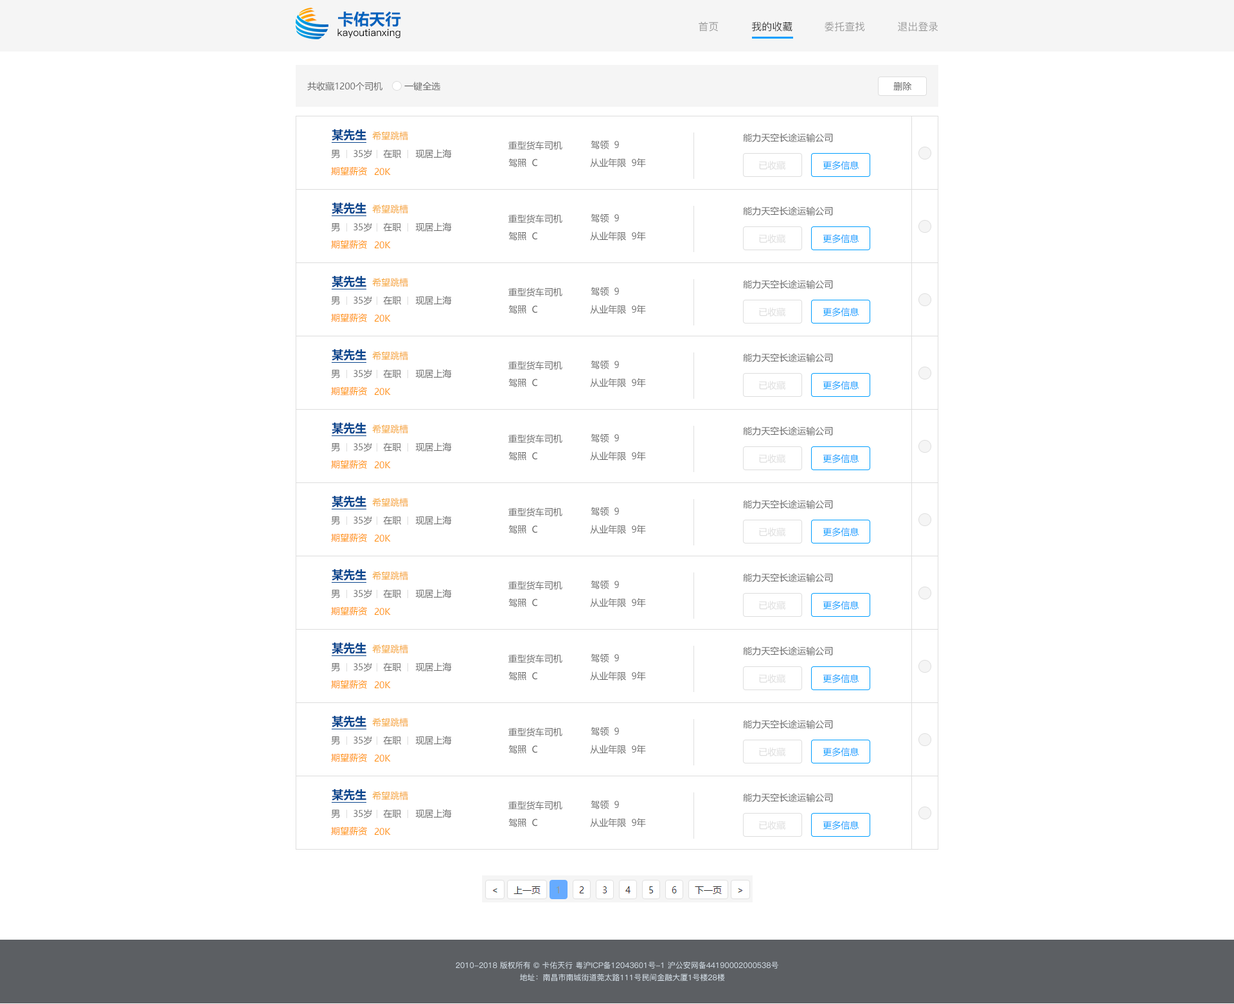
<style>
.page{position:relative;width:1234px;height:1004px;background:#ffffff}
.page>*{position:absolute;margin:0}
.t1{font:15.8px "MicrosoftYaHei-Bold";color:#0263bd}
.t2{font:10px "PingFang-SC-Medium";color:#000000}
.t3{font:10.3px "PingFang-SC-Medium";color:#999999}
.t4{font:10.3px "PingFang-SC-Medium";color:#333333}
.t5{font:9px "MicrosoftYaHei";color:#666666}
.t6{font:11.6px "MicrosoftYaHei-Bold";color:#09458d}
.t7{font:9px "MicrosoftYaHei";color:#f5a331}
.t8{font:9px "MicrosoftYaHei";color:#dddddd}
.t9{font:9px "MicrosoftYaHei";color:#009eff}
.t10{font:9px "MicrosoftYaHei";color:#ff8f05}
.t11{font:7.7px/12.2px "PingFang-SC-Medium";color:#d6e0e9}
</style>
<div class="page">
<p class="t1" style="left:338px;top:11px;width:63px;height:16px">卡佑天行</p>
<p class="t2" style="left:338px;top:28px;width:63px;height:11px">kayoutianxing</p>
<p class="t3" style="left:699px;top:22px;width:20px;height:10px">首页</p>
<p class="t4" style="left:752px;top:22px;width:41px;height:10px">我的收藏</p>
<p class="t3" style="left:825px;top:22px;width:40px;height:10px">委托查找</p>
<p class="t3" style="left:898px;top:22px;width:41px;height:10px">退出登录</p>
<p class="t5" style="left:307px;top:82px;width:75px;height:9px">共收藏1200个司机</p>
<p class="t5" style="left:404px;top:82px;width:36px;height:9px">一键全选</p>
<p class="t5" style="left:894px;top:82px;width:18px;height:9px">删除</p>
<p class="t6" style="left:332px;top:129px;width:34px;height:12px">某先生</p>
<p class="t7" style="left:372px;top:131px;width:36px;height:9px">希望跳槽</p>
<p class="t5" style="left:743px;top:133px;width:90px;height:9px">能力天空长途运输公司</p>
<p class="t5" style="left:331px;top:150px;width:9px;height:8px">男</p>
<p class="t5" style="left:354px;top:149px;width:18px;height:9px">35岁</p>
<p class="t5" style="left:383px;top:149px;width:18px;height:9px">在职</p>
<p class="t5" style="left:415px;top:149px;width:37px;height:9px">现居上海</p>
<p class="t5" style="left:509px;top:141px;width:53px;height:9px">重型货车司机</p>
<p class="t5" style="left:591px;top:140px;width:28px;height:9px">驾领  9</p>
<p class="t5" style="left:509px;top:158px;width:28px;height:9px">驾照  C</p>
<p class="t5" style="left:590px;top:158px;width:56px;height:9px">从业年限  9年</p>
<p class="t8" style="left:759px;top:161px;width:27px;height:9px">已收藏</p>
<p class="t9" style="left:823px;top:161px;width:37px;height:9px">更多信息</p>
<p class="t10" style="left:331px;top:166px;width:36px;height:10px">期望薪资</p>
<p class="t10" style="left:375px;top:168px;width:16px;height:8px">20K</p>
<p class="t6" style="left:332px;top:203px;width:34px;height:11px">某先生</p>
<p class="t7" style="left:372px;top:204px;width:36px;height:9px">希望跳槽</p>
<p class="t5" style="left:743px;top:206px;width:90px;height:9px">能力天空长途运输公司</p>
<p class="t5" style="left:509px;top:214px;width:53px;height:9px">重型货车司机</p>
<p class="t5" style="left:591px;top:213px;width:28px;height:9px">驾领  9</p>
<p class="t5" style="left:331px;top:223px;width:9px;height:8px">男</p>
<p class="t5" style="left:354px;top:222px;width:18px;height:9px">35岁</p>
<p class="t5" style="left:383px;top:222px;width:18px;height:9px">在职</p>
<p class="t5" style="left:415px;top:222px;width:37px;height:9px">现居上海</p>
<p class="t5" style="left:509px;top:231px;width:28px;height:9px">驾照  C</p>
<p class="t5" style="left:590px;top:231px;width:56px;height:9px">从业年限  9年</p>
<p class="t10" style="left:331px;top:240px;width:36px;height:9px">期望薪资</p>
<p class="t10" style="left:375px;top:241px;width:16px;height:8px">20K</p>
<p class="t8" style="left:759px;top:234px;width:27px;height:9px">已收藏</p>
<p class="t9" style="left:823px;top:234px;width:37px;height:9px">更多信息</p>
<p class="t6" style="left:332px;top:276px;width:34px;height:11px">某先生</p>
<p class="t7" style="left:372px;top:278px;width:36px;height:9px">希望跳槽</p>
<p class="t5" style="left:743px;top:280px;width:90px;height:9px">能力天空长途运输公司</p>
<p class="t5" style="left:509px;top:287px;width:53px;height:9px">重型货车司机</p>
<p class="t5" style="left:591px;top:287px;width:28px;height:9px">驾领  9</p>
<p class="t5" style="left:331px;top:296px;width:9px;height:9px">男</p>
<p class="t5" style="left:354px;top:296px;width:18px;height:9px">35岁</p>
<p class="t5" style="left:383px;top:296px;width:18px;height:9px">在职</p>
<p class="t5" style="left:415px;top:296px;width:37px;height:9px">现居上海</p>
<p class="t5" style="left:509px;top:305px;width:28px;height:9px">驾照  C</p>
<p class="t5" style="left:590px;top:305px;width:56px;height:9px">从业年限  9年</p>
<p class="t10" style="left:331px;top:313px;width:36px;height:9px">期望薪资</p>
<p class="t10" style="left:375px;top:314px;width:16px;height:8px">20K</p>
<p class="t8" style="left:759px;top:307px;width:27px;height:9px">已收藏</p>
<p class="t9" style="left:823px;top:307px;width:37px;height:9px">更多信息</p>
<p class="t6" style="left:332px;top:349px;width:34px;height:12px">某先生</p>
<p class="t7" style="left:372px;top:351px;width:36px;height:9px">希望跳槽</p>
<p class="t5" style="left:743px;top:353px;width:90px;height:9px">能力天空长途运输公司</p>
<p class="t5" style="left:509px;top:361px;width:53px;height:9px">重型货车司机</p>
<p class="t5" style="left:591px;top:360px;width:28px;height:9px">驾领  9</p>
<p class="t5" style="left:331px;top:370px;width:9px;height:8px">男</p>
<p class="t5" style="left:354px;top:369px;width:18px;height:9px">35岁</p>
<p class="t5" style="left:383px;top:369px;width:18px;height:9px">在职</p>
<p class="t5" style="left:415px;top:369px;width:37px;height:9px">现居上海</p>
<p class="t10" style="left:331px;top:386px;width:36px;height:9px">期望薪资</p>
<p class="t10" style="left:375px;top:388px;width:16px;height:7px">20K</p>
<p class="t5" style="left:509px;top:378px;width:28px;height:9px">驾照  C</p>
<p class="t5" style="left:590px;top:378px;width:56px;height:9px">从业年限  9年</p>
<p class="t8" style="left:759px;top:381px;width:27px;height:9px">已收藏</p>
<p class="t9" style="left:823px;top:381px;width:37px;height:9px">更多信息</p>
<p class="t6" style="left:332px;top:422px;width:34px;height:12px">某先生</p>
<p class="t7" style="left:372px;top:424px;width:36px;height:9px">希望跳槽</p>
<p class="t5" style="left:509px;top:434px;width:53px;height:9px">重型货车司机</p>
<p class="t5" style="left:591px;top:433px;width:28px;height:9px">驾领  9</p>
<p class="t5" style="left:743px;top:426px;width:90px;height:9px">能力天空长途运输公司</p>
<p class="t5" style="left:331px;top:443px;width:9px;height:8px">男</p>
<p class="t5" style="left:354px;top:442px;width:18px;height:9px">35岁</p>
<p class="t5" style="left:383px;top:442px;width:18px;height:9px">在职</p>
<p class="t5" style="left:415px;top:442px;width:37px;height:9px">现居上海</p>
<p class="t10" style="left:331px;top:460px;width:36px;height:9px">期望薪资</p>
<p class="t10" style="left:375px;top:461px;width:16px;height:8px">20K</p>
<p class="t5" style="left:509px;top:451px;width:28px;height:9px">驾照  C</p>
<p class="t5" style="left:590px;top:451px;width:56px;height:9px">从业年限  9年</p>
<p class="t8" style="left:759px;top:454px;width:27px;height:9px">已收藏</p>
<p class="t9" style="left:823px;top:454px;width:37px;height:9px">更多信息</p>
<p class="t6" style="left:332px;top:496px;width:34px;height:11px">某先生</p>
<p class="t7" style="left:372px;top:498px;width:36px;height:9px">希望跳槽</p>
<p class="t5" style="left:509px;top:507px;width:53px;height:9px">重型货车司机</p>
<p class="t5" style="left:591px;top:507px;width:28px;height:9px">驾领  9</p>
<p class="t5" style="left:743px;top:500px;width:90px;height:9px">能力天空长途运输公司</p>
<p class="t5" style="left:331px;top:516px;width:9px;height:9px">男</p>
<p class="t5" style="left:354px;top:516px;width:18px;height:9px">35岁</p>
<p class="t5" style="left:383px;top:516px;width:18px;height:9px">在职</p>
<p class="t5" style="left:415px;top:516px;width:37px;height:9px">现居上海</p>
<p class="t10" style="left:331px;top:533px;width:36px;height:9px">期望薪资</p>
<p class="t5" style="left:509px;top:525px;width:28px;height:9px">驾照  C</p>
<p class="t5" style="left:590px;top:525px;width:56px;height:9px">从业年限  9年</p>
<p class="t8" style="left:759px;top:527px;width:27px;height:9px">已收藏</p>
<p class="t9" style="left:823px;top:527px;width:37px;height:9px">更多信息</p>
<p class="t10" style="left:375px;top:534px;width:16px;height:8px">20K</p>
<p class="t6" style="left:332px;top:569px;width:34px;height:11px">某先生</p>
<p class="t7" style="left:372px;top:571px;width:36px;height:9px">希望跳槽</p>
<p class="t5" style="left:509px;top:580px;width:53px;height:10px">重型货车司机</p>
<p class="t5" style="left:591px;top:580px;width:28px;height:9px">驾领  9</p>
<p class="t5" style="left:743px;top:573px;width:90px;height:9px">能力天空长途运输公司</p>
<p class="t5" style="left:331px;top:590px;width:9px;height:8px">男</p>
<p class="t5" style="left:354px;top:589px;width:18px;height:9px">35岁</p>
<p class="t5" style="left:383px;top:589px;width:18px;height:9px">在职</p>
<p class="t5" style="left:415px;top:589px;width:37px;height:9px">现居上海</p>
<p class="t5" style="left:509px;top:598px;width:28px;height:9px">驾照  C</p>
<p class="t5" style="left:590px;top:598px;width:56px;height:9px">从业年限  9年</p>
<p class="t8" style="left:759px;top:600px;width:27px;height:9px">已收藏</p>
<p class="t9" style="left:823px;top:600px;width:37px;height:9px">更多信息</p>
<p class="t10" style="left:331px;top:606px;width:36px;height:9px">期望薪资</p>
<p class="t10" style="left:375px;top:608px;width:16px;height:7px">20K</p>
<p class="t6" style="left:332px;top:642px;width:34px;height:12px">某先生</p>
<p class="t7" style="left:372px;top:644px;width:36px;height:9px">希望跳槽</p>
<p class="t5" style="left:509px;top:654px;width:53px;height:9px">重型货车司机</p>
<p class="t5" style="left:591px;top:653px;width:28px;height:9px">驾领  9</p>
<p class="t5" style="left:743px;top:646px;width:90px;height:9px">能力天空长途运输公司</p>
<p class="t5" style="left:331px;top:663px;width:9px;height:8px">男</p>
<p class="t5" style="left:354px;top:662px;width:18px;height:9px">35岁</p>
<p class="t5" style="left:383px;top:662px;width:18px;height:9px">在职</p>
<p class="t5" style="left:415px;top:662px;width:37px;height:9px">现居上海</p>
<p class="t5" style="left:509px;top:671px;width:28px;height:9px">驾照  C</p>
<p class="t5" style="left:590px;top:671px;width:56px;height:9px">从业年限  9年</p>
<p class="t8" style="left:759px;top:674px;width:27px;height:9px">已收藏</p>
<p class="t9" style="left:823px;top:674px;width:37px;height:9px">更多信息</p>
<p class="t10" style="left:331px;top:680px;width:36px;height:8px">期望薪资</p>
<p class="t10" style="left:375px;top:681px;width:16px;height:7px">20K</p>
<p class="t6" style="left:332px;top:716px;width:34px;height:11px">某先生</p>
<p class="t7" style="left:372px;top:717px;width:36px;height:9px">希望跳槽</p>
<p class="t5" style="left:743px;top:719px;width:90px;height:9px">能力天空长途运输公司</p>
<p class="t5" style="left:331px;top:736px;width:9px;height:8px">男</p>
<p class="t5" style="left:354px;top:735px;width:18px;height:9px">35岁</p>
<p class="t5" style="left:383px;top:735px;width:18px;height:9px">在职</p>
<p class="t5" style="left:415px;top:735px;width:37px;height:9px">现居上海</p>
<p class="t5" style="left:509px;top:727px;width:53px;height:9px">重型货车司机</p>
<p class="t5" style="left:591px;top:726px;width:28px;height:9px">驾领  9</p>
<p class="t5" style="left:509px;top:744px;width:28px;height:9px">驾照  C</p>
<p class="t5" style="left:590px;top:744px;width:56px;height:9px">从业年限  9年</p>
<p class="t8" style="left:759px;top:747px;width:27px;height:9px">已收藏</p>
<p class="t9" style="left:823px;top:747px;width:37px;height:9px">更多信息</p>
<p class="t10" style="left:331px;top:753px;width:36px;height:9px">期望薪资</p>
<p class="t10" style="left:375px;top:754px;width:16px;height:8px">20K</p>
<p class="t6" style="left:332px;top:789px;width:34px;height:11px">某先生</p>
<p class="t7" style="left:372px;top:791px;width:36px;height:9px">希望跳槽</p>
<p class="t5" style="left:743px;top:793px;width:90px;height:9px">能力天空长途运输公司</p>
<p class="t5" style="left:331px;top:809px;width:9px;height:9px">男</p>
<p class="t5" style="left:354px;top:809px;width:18px;height:9px">35岁</p>
<p class="t5" style="left:383px;top:809px;width:18px;height:9px">在职</p>
<p class="t5" style="left:415px;top:809px;width:37px;height:9px">现居上海</p>
<p class="t5" style="left:509px;top:800px;width:53px;height:9px">重型货车司机</p>
<p class="t5" style="left:591px;top:800px;width:28px;height:9px">驾领  9</p>
<p class="t5" style="left:509px;top:818px;width:28px;height:9px">驾照  C</p>
<p class="t5" style="left:590px;top:818px;width:56px;height:9px">从业年限  9年</p>
<p class="t8" style="left:759px;top:820px;width:27px;height:9px">已收藏</p>
<p class="t9" style="left:823px;top:820px;width:37px;height:9px">更多信息</p>
<p class="t10" style="left:331px;top:826px;width:36px;height:9px">期望薪资</p>
<p class="t10" style="left:375px;top:827px;width:16px;height:8px">20K</p>
<p class="t11" style="left:456px;top:961px;width:323px;height:20px;text-align:center">2010-2018 版权所有 © 卡佑天行 粤沪ICP备12043601号-1 沪公安网备44190002000538号    <br>地址：南昌市南城街道莞太路111号民间金融大厦1号楼28楼</p>
</div>
